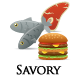
<style>
.page{position:relative;width:80px;height:80px;background:#ffffff}
.page>*{position:absolute;margin:0}
.t1{font:12px "TrajanPro-Regular";letter-spacing:-0.035em;color:#000000;font-weight:bold}
</style>
<div class="page">
<p class="t1" style="left:16px;top:64px;width:46px;height:11px">Savory</p>
</div>
